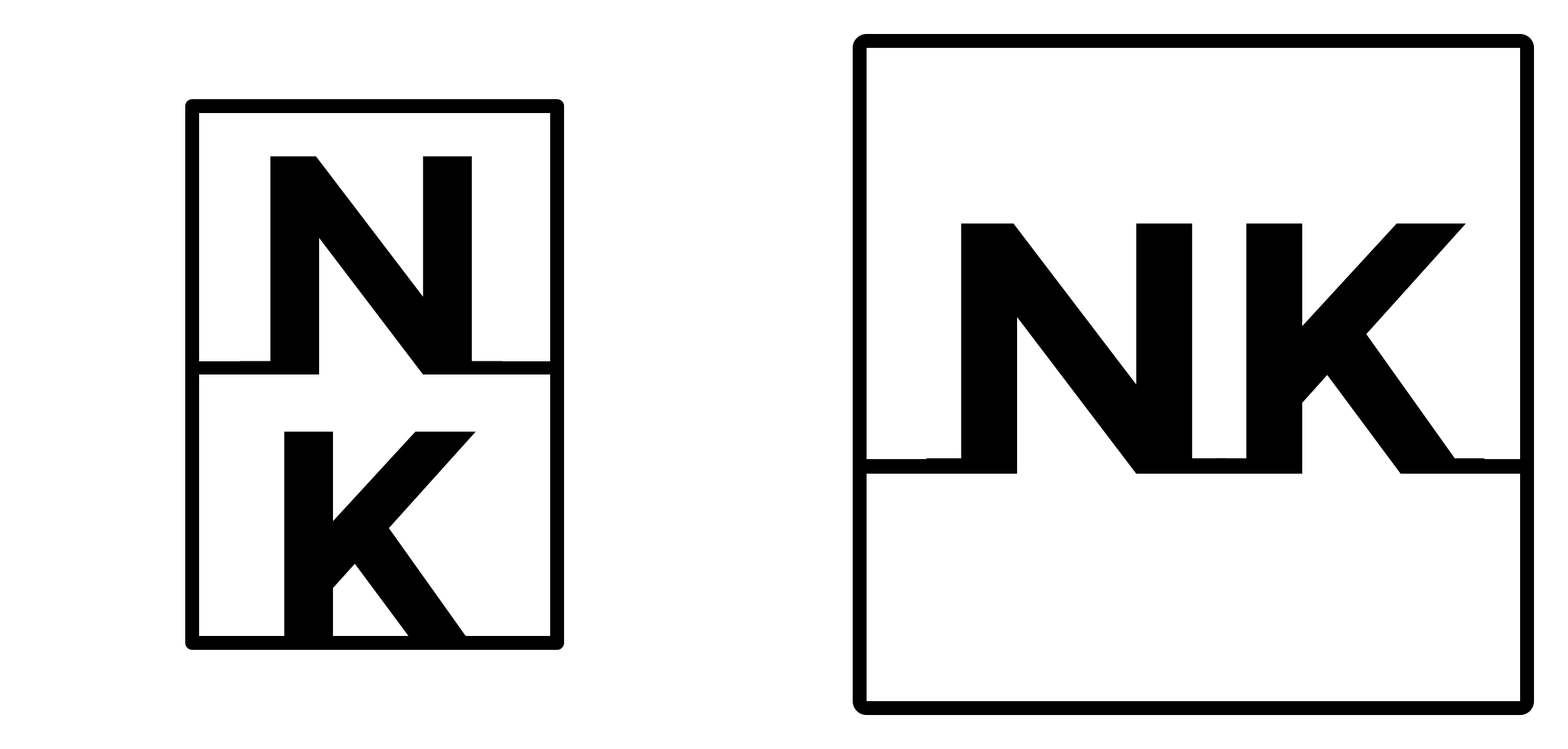
<style>
.page{position:relative;width:1568px;height:749px;background:#ffffff}
.page>*{position:absolute;margin:0}
.t1{font:312.2px "MontserratSubrayada-Bold";letter-spacing:0.2em;color:#000000;text-transform:uppercase}
.t2{font:358px "MontserratSubrayada-Bold";letter-spacing:-0.02em;color:#000000;text-transform:uppercase}
</style>
<div class="page">
<p class="t1" style="left:240px;top:156px;width:262px;height:219px">N</p>
<p class="t2" style="left:926px;top:223px;width:559px;height:251px">nk</p>
<p class="t1" style="left:257px;top:432px;width:235px;height:218px">k</p>
</div>
